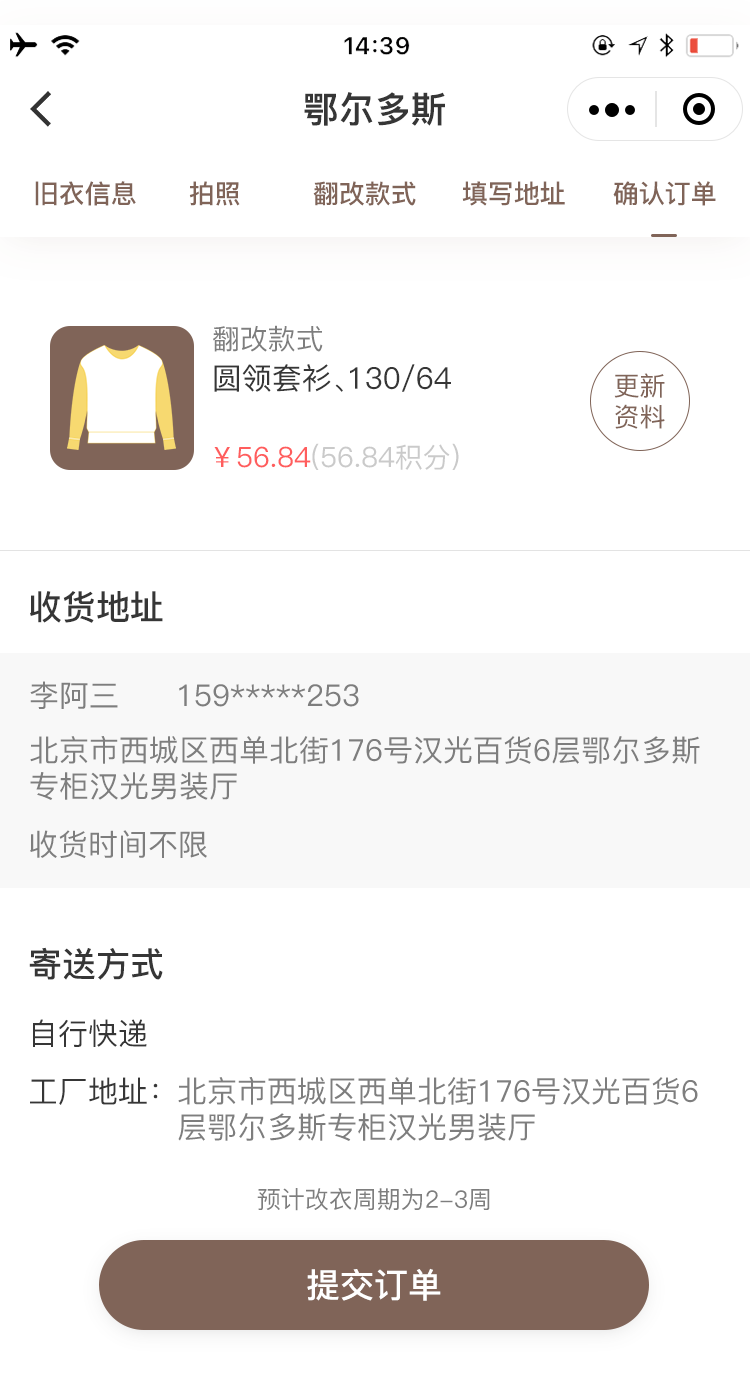
<style>
.page{position:relative;width:750px;height:1385px;background:#ffffff}
.page>*{position:absolute;margin:0}
.t1{font:36px "PingFang-SC-Heavy";color:#363636}
.t2{font:26px "PingFang-SC-Bold";color:#806458}
.t3{font:28px "PingFang-SC-Medium";color:#7e7e7e}
.t4{font:30px "PingFang-SC-Medium";color:#363636}
.t5{font:26px "PingFang-SC-Medium";color:#806458}
.t6{font:28px "PingFang-SC-Medium";color:#cacaca}
.t7{font:28px "PingFang-SC-Medium";color:#ff5d5d}
.t8{font:34px "PingFang-SC-Bold";color:#363636}
.t9{font:30px "PingFang-SC-Medium";color:#7e7e7e}
.t10{font:24px "PingFang-SC-Medium";color:#7e7e7e}
.t11{font:34px "PingFang-SC-Bold";color:#ffffff}
</style>
<div class="page">
<p class="t1" style="left:304px;top:92px;width:141px;height:34px">鄂尔多斯</p>
<p class="t2" style="left:35px;top:181px;width:101px;height:25px">旧衣信息</p>
<p class="t2" style="left:189px;top:181px;width:51px;height:25px">拍照</p>
<p class="t2" style="left:313px;top:181px;width:103px;height:25px">翻改款式</p>
<p class="t2" style="left:462px;top:181px;width:103px;height:25px">填写地址</p>
<p class="t2" style="left:613px;top:181px;width:103px;height:25px">确认订单</p>
<p class="t3" style="left:213px;top:325px;width:110px;height:27px">翻改款式</p>
<p class="t4" style="left:214px;top:364px;width:237px;height:28px">圆领套衫、130/64</p>
<p class="t5" style="left:614px;top:373px;width:51px;height:56px">更新<br>资料</p>
<p class="t6" style="left:214px;top:443px;width:245px;height:27px"><span class="t7">￥56.84</span>(56.84积分)</p>
<p class="t8" style="left:30px;top:591px;width:133px;height:32px">收货地址</p>
<p class="t9" style="left:30px;top:681px;width:88px;height:28px">李阿三</p>
<p class="t9" style="left:179px;top:684px;width:180px;height:23px">159*****253</p>
<p class="t9" style="left:30px;top:736px;width:670px;height:64px">北京市西城区西单北街176号汉光百货6层鄂尔多斯专柜汉光男装厅</p>
<p class="t9" style="left:30px;top:830px;width:177px;height:28px">收货时间不限</p>
<p class="t8" style="left:29px;top:947px;width:134px;height:33px">寄送方式</p>
<p class="t4" style="left:33px;top:1019px;width:114px;height:28px">自行快递</p>
<p class="t4" style="left:30px;top:1077px;width:128px;height:28px">工厂地址：</p>
<p class="t9" style="left:178px;top:1077px;width:520px;height:64px">北京市西城区西单北街176号汉光百货6层鄂尔多斯专柜汉光男装厅</p>
<p class="t10" style="left:257px;top:1188px;width:233px;height:23px">预计改衣周期为2-3周</p>
<p class="t11" style="left:307px;top:1268px;width:134px;height:33px">提交订单</p>
</div>
